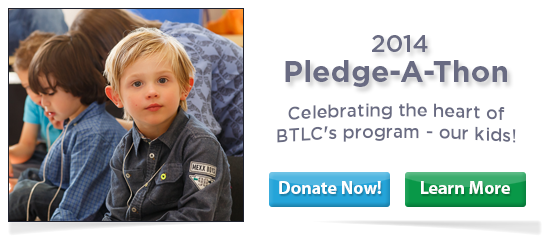
<style>
.page{position:relative;width:551px;height:247px;background:#ffffff}
.page>*{position:absolute;margin:0}
.t1{font:30px/30px "GothamBold";color:#696b82}
.t2{font:24px/35px "GothamMedium";color:#696b82}
.t3{font:18px "GothamMedium";color:#696b82}
.t4{font:18px "MyriadPro-Bold";color:#ffffff}
</style>
<div class="page">
<p class="t1" style="left:285px;top:35px;width:222px;height:52px;text-align:center"><span class="t2">2014<br></span>Pledge-A-Thon</p>
<p class="t3" style="left:277px;top:103px;width:239px;height:40px;text-align:center">Celebrating the heart of<br>BTLC's program - our kids!</p>
<p class="t4" style="left:279px;top:181px;width:102px;height:13px">Donate Now!</p>
<p class="t4" style="left:421px;top:181px;width:89px;height:13px">Learn More</p>
</div>
